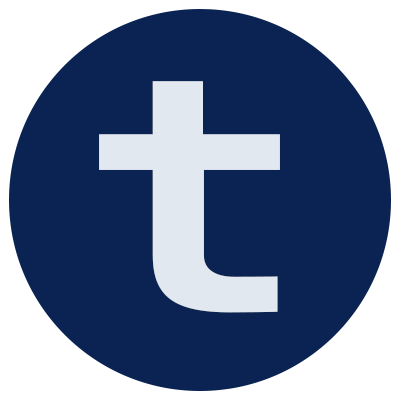
<style>
.page{position:relative;width:400px;height:400px;background:#0a2353}
.page>*{position:absolute;margin:0}
.t1{font:333.3px "SFMono-Bold";color:#e2e8f0;scale:1.15 1}
</style>
<div class="page">
<p class="t1" style="left:99px;top:81px;width:181px;height:232px">t</p>
</div>
